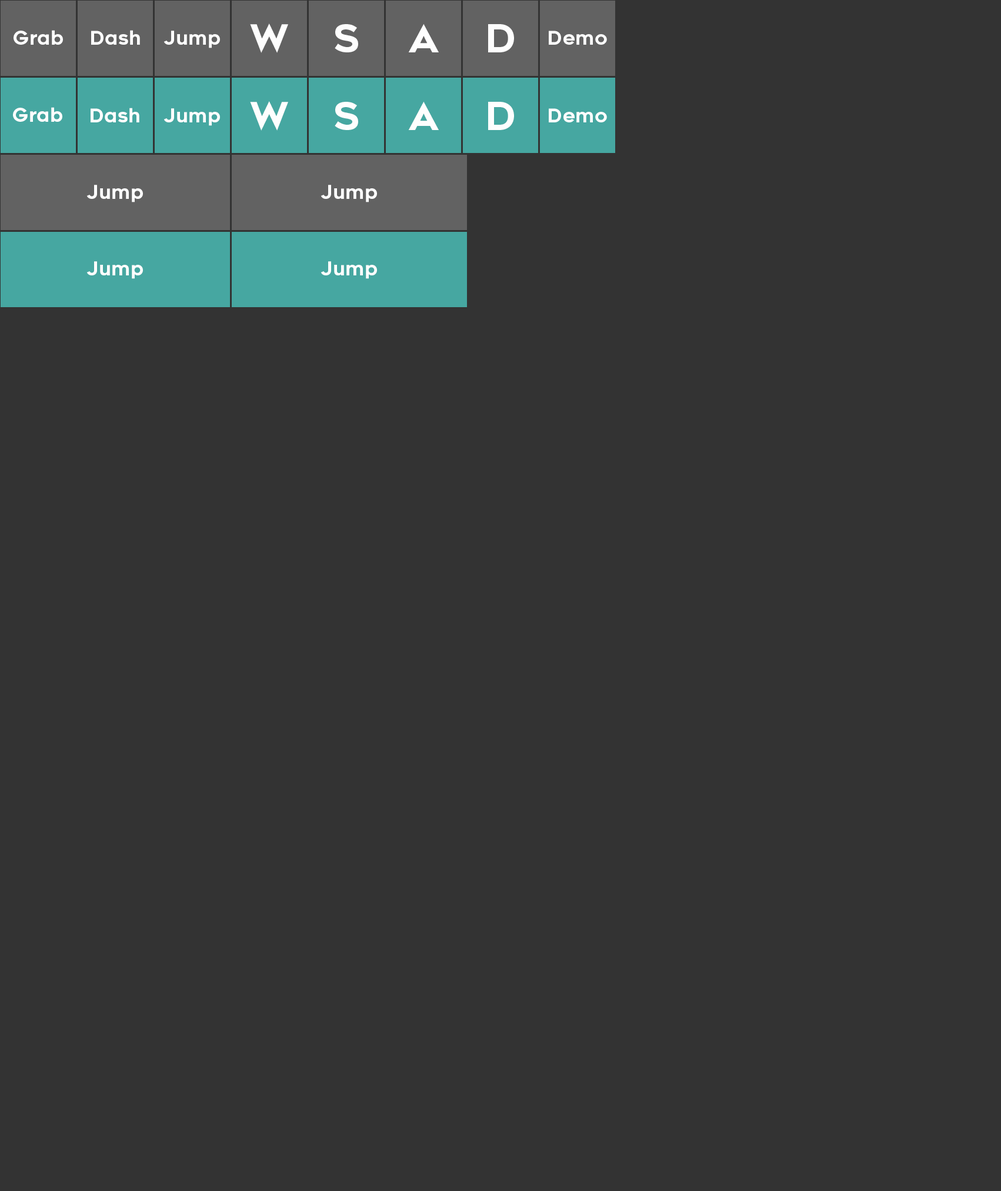
<style>
.page{position:relative;width:1001px;height:1191px;background:#333333}
.page>*{position:absolute;margin:0}
.t1{font:37.7px "Renogare-Regular";color:#fefefe}
.t2{font:36.9px "Renogare-Regular";color:#fefefe}
.t3{font:38.8px "Renogare-Regular";color:#fefefe}
.t4{font:18.8px "Renogare-Regular";color:#fefefe}
</style>
<div class="page">
<p class="t1" style="left:250px;top:24px;width:38px;height:29px">W</p>
<p class="t2" style="left:335px;top:24px;width:23px;height:28px">S</p>
<p class="t1" style="left:408px;top:24px;width:31px;height:28px">A</p>
<p class="t3" style="left:488px;top:24px;width:26px;height:28px">D</p>
<p class="t4" style="left:14px;top:30px;width:49px;height:15px">Grab</p>
<p class="t4" style="left:91px;top:30px;width:49px;height:15px">Dash</p>
<p class="t4" style="left:164px;top:31px;width:56px;height:17px">Jump</p>
<p class="t4" style="left:549px;top:31px;width:58px;height:14px">Demo</p>
<p class="t1" style="left:250px;top:101px;width:38px;height:30px">W</p>
<p class="t2" style="left:335px;top:102px;width:23px;height:28px">S</p>
<p class="t1" style="left:408px;top:101px;width:31px;height:29px">A</p>
<p class="t3" style="left:488px;top:102px;width:26px;height:28px">D</p>
<p class="t4" style="left:13px;top:107px;width:49px;height:15px">Grab</p>
<p class="t4" style="left:91px;top:108px;width:48px;height:14px">Dash</p>
<p class="t4" style="left:164px;top:108px;width:56px;height:18px">Jump</p>
<p class="t4" style="left:549px;top:108px;width:58px;height:14px">Demo</p>
<p class="t4" style="left:86px;top:185px;width:57px;height:17px">Jump</p>
<p class="t4" style="left:321px;top:185px;width:56px;height:17px">Jump</p>
<p class="t4" style="left:86px;top:261px;width:57px;height:18px">Jump</p>
<p class="t4" style="left:321px;top:261px;width:56px;height:18px">Jump</p>
</div>
